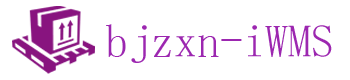
<style>
.page{position:relative;width:350px;height:80px;background:#ffffff}
.page>*{position:absolute;margin:0}
.t1{font:45.8px "SimSun";color:#9c27b0}
</style>
<div class="page">
<p class="t1" style="left:106px;top:24px;width:226px;height:39px">bjzxn-iWMS</p>
</div>
